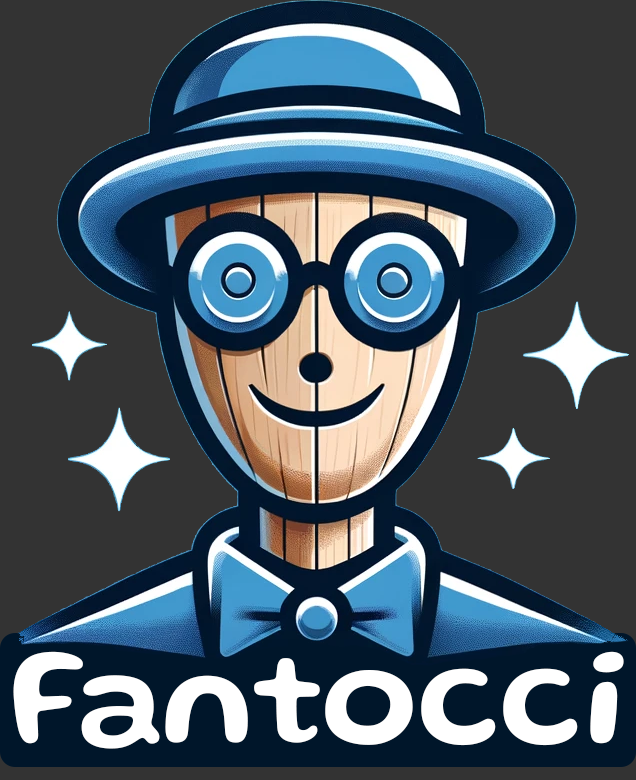
<style>
.page{position:relative;width:636px;height:780px;background:#333333}
.page>*{position:absolute;margin:0}
.t1{font:140px "GlutenDefault-Medium";color:#ffffff}
</style>
<div class="page">
<p class="t1" style="left:13px;top:651px;width:611px;height:98px">Fantocci</p>
</div>
